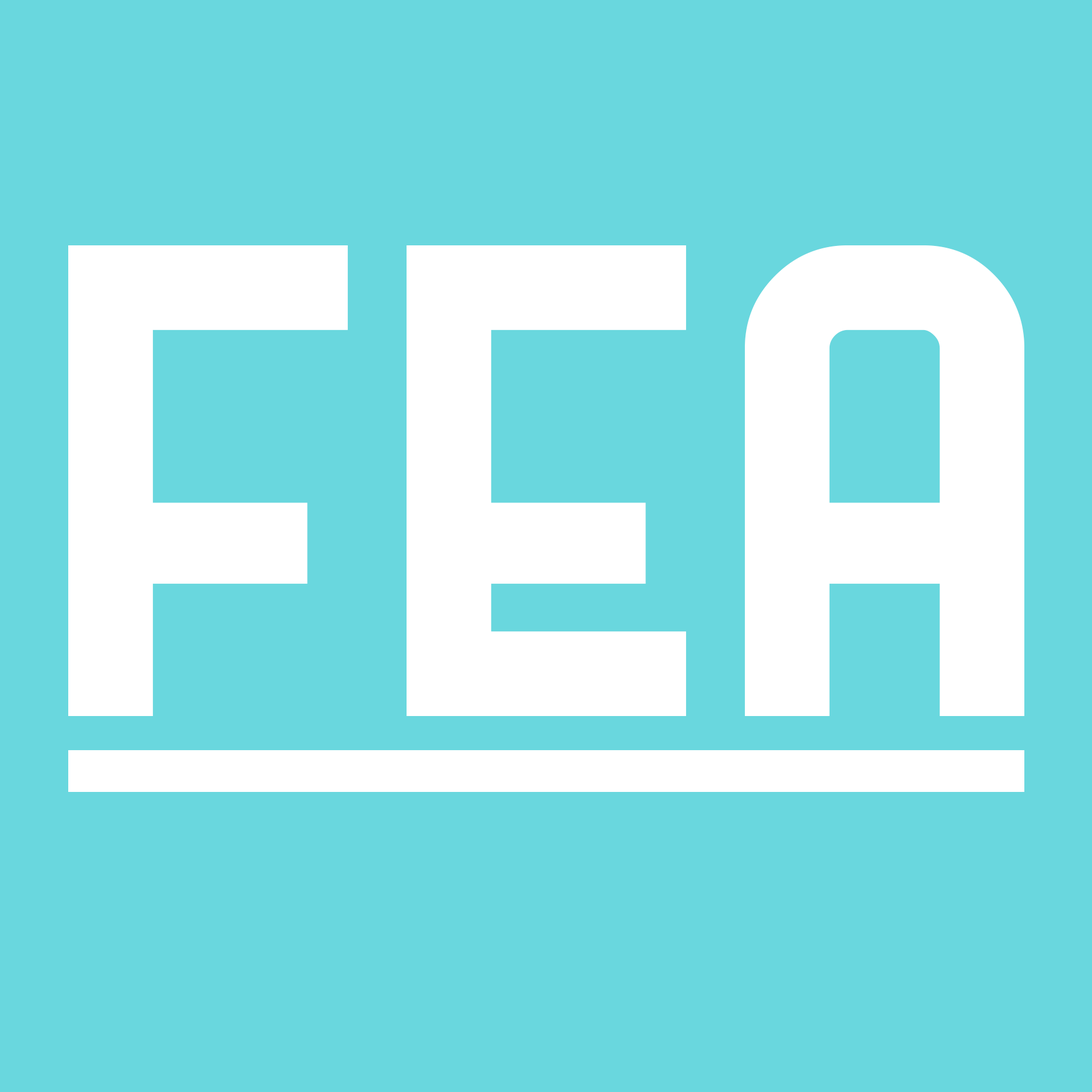
<style>
.page{position:relative;width:1092px;height:1092px;background:#69d7de}
.page>*{position:absolute;margin:0}
.t1{font:588.4px "StadiumRegular";letter-spacing:-0.1em;color:#ffffff}
</style>
<div class="page">
<p class="t1" style="left:68px;top:245px;width:956px;height:471px">FEA</p>
</div>
